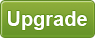
<style>
.page{position:relative;width:95px;height:38px}
.page>*{position:absolute;margin:0}
.t1{font:20px "Arial-BoldMT";color:#ffffff}
</style>
<div class="page">
<p class="t1" style="left:8px;top:11px;width:79px;height:19px">Upgrade</p>
</div>
